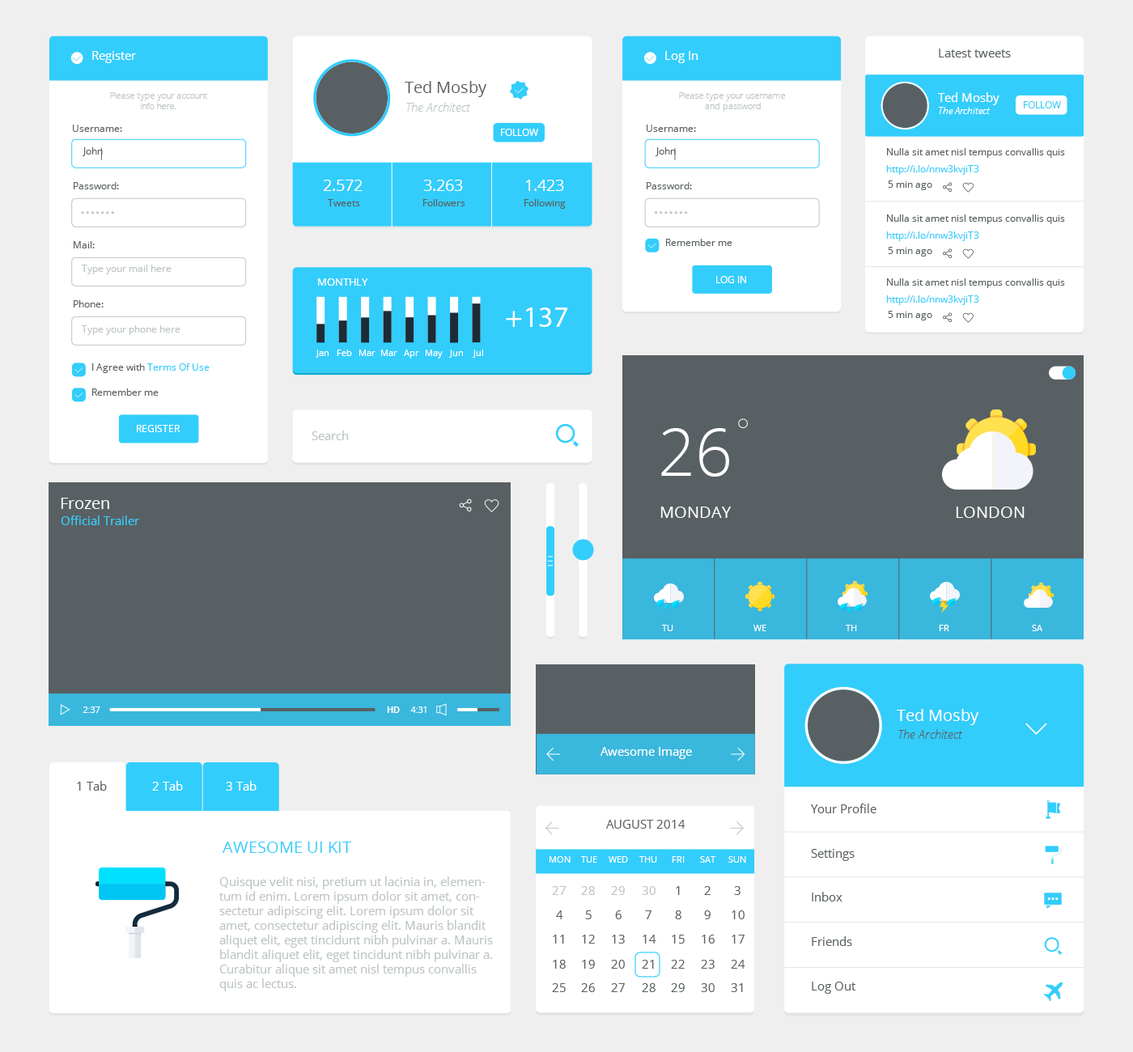
<style>
.page{position:relative;width:1133px;height:1052px;background:#ffffff}
.page>*{position:absolute;margin:0}
.t1{font:12.1px "OpenSans";color:#ffffff}
.t2{font:12.1px "OpenSans";color:#596063}
.t3{font:16.2px "OpenSans";color:#596063}
.t4{font:8.9px "OpenSans-Light";color:#bdc4c6}
.t5{font:12.1px "OpenSansLight-Italic";color:#bdc4c6}
.t6{font:9.7px "OpenSans";color:#32cdfb}
.t7{font:9.7px "OpenSansLight-Italic";color:#ffffff}
.t8{font:9.7px "OpenSans";color:#596063}
.t9{font:9.7px "OpenSans";color:#ffffff}
.t10{font:16.2px "OpenSans";color:#ffffff}
.t11{font:9.7px "OpenSans";color:#bdc4c6}
.t12{font:10.3px "OpenSans";color:#ffffff}
.t13{font:29.7px "MyriadPro-Regular";color:#ffffff}
.t14{font:8.9px "OpenSans";color:#ffffff}
.t15{font:12.1px "OpenSans";color:#bdc4c6}
.t16{font:65.4px "OpenSans-Light";color:#ffffff}
.t17{font:12.1px "OpenSans";color:#32cdfb}
.t18{font:8.9px "OpenSans-Semibold";color:#ffffff}
.t19{font:12.1px "OpenSansLight-Italic";color:#596063}
.t20{font:16.2px "OpenSans";color:#32cdfb}
</style>
<div class="page">
<p class="t1" style="left:92px;top:51px;width:44px;height:12px">Register</p>
<p class="t1" style="left:665px;top:51px;width:34px;height:12px">Log In</p>
<p class="t2" style="left:939px;top:49px;width:72px;height:8px">Latest tweets</p>
<p class="t3" style="left:405px;top:81px;width:81px;height:16px">Ted Mosby</p>
<p class="t4" style="left:110px;top:92px;width:97px;height:17px;text-align:center">Please type your account<br>info here.</p>
<p class="t5" style="left:406px;top:102px;width:65px;height:10px">The Architect</p>
<p class="t4" style="left:679px;top:92px;width:106px;height:20px;text-align:center">Please type your username <br>and password</p>
<p class="t1" style="left:938px;top:92px;width:62px;height:13px">Ted Mosby</p>
<p class="t6" style="left:1024px;top:101px;width:37px;height:7px">FOLLOW</p>
<p class="t7" style="left:939px;top:107px;width:52px;height:7px">The Architect</p>
<p class="t8" style="left:73px;top:125px;width:49px;height:7px">Username:</p>
<p class="t8" style="left:647px;top:125px;width:49px;height:7px">Username:</p>
<p class="t9" style="left:501px;top:129px;width:37px;height:7px">FOLLOW</p>
<p class="t8" style="left:82px;top:147px;width:21px;height:9px">John</p>
<p class="t8" style="left:655px;top:147px;width:21px;height:9px">John</p>
<p class="t8" style="left:887px;top:148px;width:178px;height:10px">Nulla sit amet nisl tempus convallis quis</p>
<p class="t6" style="left:886px;top:165px;width:93px;height:10px">http://i.lo/nnw3kvjiT3</p>
<p class="t8" style="left:74px;top:182px;width:45px;height:7px">Password:</p>
<p class="t10" style="left:323px;top:180px;width:40px;height:11px">2.572</p>
<p class="t10" style="left:423px;top:180px;width:40px;height:11px">3.263</p>
<p class="t10" style="left:526px;top:180px;width:38px;height:11px">1.423</p>
<p class="t8" style="left:647px;top:182px;width:45px;height:7px">Password:</p>
<p class="t8" style="left:888px;top:181px;width:44px;height:9px">5 min ago</p>
<p class="t8" style="left:328px;top:199px;width:32px;height:7px">Tweets</p>
<p class="t8" style="left:423px;top:199px;width:42px;height:7px">Followers</p>
<p class="t8" style="left:525px;top:199px;width:41px;height:10px">Following</p>
<p class="t8" style="left:887px;top:214px;width:178px;height:10px">Nulla sit amet nisl tempus convallis quis</p>
<p class="t6" style="left:886px;top:231px;width:93px;height:10px">http://i.lo/nnw3kvjiT3</p>
<p class="t8" style="left:74px;top:241px;width:21px;height:7px">Mail:</p>
<p class="t8" style="left:666px;top:239px;width:67px;height:7px">Remember me</p>
<p class="t8" style="left:888px;top:247px;width:44px;height:10px">5 min ago</p>
<p class="t11" style="left:82px;top:265px;width:90px;height:9px">Type your mail here</p>
<p class="t12" style="left:318px;top:278px;width:50px;height:8px">MONTHLY</p>
<p class="t9" style="left:716px;top:276px;width:30px;height:7px">LOG IN</p>
<p class="t8" style="left:887px;top:278px;width:178px;height:10px">Nulla sit amet nisl tempus convallis quis</p>
<p class="t8" style="left:74px;top:300px;width:30px;height:8px">Phone:</p>
<p class="t6" style="left:886px;top:295px;width:93px;height:10px">http://i.lo/nnw3kvjiT3</p>
<p class="t13" style="left:506px;top:308px;width:61px;height:19px">+137</p>
<p class="t8" style="left:888px;top:311px;width:44px;height:10px">5 min ago</p>
<p class="t11" style="left:82px;top:325px;width:99px;height:10px">Type your phone here</p>
<p class="t14" style="left:316px;top:350px;width:13px;height:8px">Jan</p>
<p class="t14" style="left:337px;top:350px;width:15px;height:6px">Feb</p>
<p class="t14" style="left:359px;top:350px;width:17px;height:6px">Mar</p>
<p class="t14" style="left:381px;top:350px;width:16px;height:6px">Mar</p>
<p class="t14" style="left:404px;top:350px;width:15px;height:9px">Apr</p>
<p class="t14" style="left:426px;top:350px;width:17px;height:9px">May</p>
<p class="t14" style="left:449px;top:350px;width:14px;height:8px">Jun</p>
<p class="t14" style="left:473px;top:350px;width:10px;height:8px">Jul</p>
<p class="t8" style="left:92px;top:363px;width:118px;height:10px">I Agree with <span class="t6">Terms Of Use</span></p>
<p class="t8" style="left:92px;top:389px;width:67px;height:7px">Remember me</p>
<p class="t9" style="left:137px;top:425px;width:44px;height:7px">REGISTER</p>
<p class="t15" style="left:312px;top:431px;width:37px;height:9px">Search</p>
<p class="t16" style="left:661px;top:428px;width:68px;height:49px">26</p>
<p class="t10" style="left:61px;top:498px;width:48px;height:11px">Frozen</p>
<p class="t10" style="left:660px;top:507px;width:72px;height:11px">MONDAY</p>
<p class="t10" style="left:956px;top:507px;width:69px;height:11px">LONDON</p>
<p class="t17" style="left:61px;top:516px;width:78px;height:9px">Official Trailer</p>
<p class="t14" style="left:662px;top:625px;width:11px;height:6px">TU</p>
<p class="t14" style="left:754px;top:625px;width:13px;height:6px">WE</p>
<p class="t14" style="left:846px;top:625px;width:11px;height:6px">TH</p>
<p class="t14" style="left:939px;top:625px;width:10px;height:6px">FR</p>
<p class="t14" style="left:1032px;top:625px;width:11px;height:6px">SA</p>
<p class="t14" style="left:83px;top:707px;width:17px;height:6px">2:37</p>
<p class="t18" style="left:387px;top:707px;width:13px;height:6px">HD</p>
<p class="t14" style="left:410px;top:707px;width:17px;height:6px">4:31</p>
<p class="t10" style="left:897px;top:709px;width:82px;height:16px">Ted Mosby</p>
<p class="t19" style="left:898px;top:729px;width:65px;height:10px">The Architect</p>
<p class="t1" style="left:601px;top:747px;width:91px;height:12px">Awesome Image</p>
<p class="t2" style="left:77px;top:781px;width:30px;height:10px">1 Tab</p>
<p class="t1" style="left:152px;top:781px;width:31px;height:10px">2 Tab</p>
<p class="t1" style="left:226px;top:781px;width:31px;height:10px">3 Tab</p>
<p class="t2" style="left:811px;top:804px;width:66px;height:9px">Your Profile</p>
<p class="t2" style="left:606px;top:820px;width:80px;height:9px">AUGUST 2014</p>
<p class="t20" style="left:223px;top:842px;width:128px;height:11px">AWESOME UI KIT</p>
<p class="t14" style="left:550px;top:856px;width:21px;height:7px">MON</p>
<p class="t14" style="left:581px;top:856px;width:16px;height:7px">TUE</p>
<p class="t14" style="left:609px;top:856px;width:19px;height:7px">WED</p>
<p class="t14" style="left:639px;top:856px;width:18px;height:7px">THU</p>
<p class="t14" style="left:672px;top:856px;width:13px;height:7px">FRI</p>
<p class="t14" style="left:700px;top:856px;width:16px;height:7px">SAT</p>
<p class="t14" style="left:728px;top:856px;width:18px;height:7px">SUN</p>
<p class="t2" style="left:811px;top:849px;width:44px;height:12px">Settings</p>
<p class="t15" style="left:219px;top:877px;width:274px;height:115px">Quisque velit nisi, pretium ut lacinia in, elementum id enim. Lorem ipsum dolor sit amet, consectetur adipiscing elit. Lorem ipsum dolor sit amet, consectetur adipiscing elit. Mauris blandit aliquet elit, eget tincidunt nibh pulvinar a. Mauris blandit aliquet elit, eget tincidunt nibh pulvinar a. Curabitur alique sit amet nisl tempus convallis quis ac lectus.</p>
<p class="t15" style="left:552px;top:886px;width:14px;height:9px">27</p>
<p class="t15" style="left:581px;top:886px;width:14px;height:9px">28</p>
<p class="t15" style="left:611px;top:886px;width:14px;height:9px">29</p>
<p class="t15" style="left:642px;top:886px;width:14px;height:9px">30</p>
<p class="t2" style="left:676px;top:886px;width:4px;height:9px">1</p>
<p class="t2" style="left:704px;top:886px;width:7px;height:9px">2</p>
<p class="t2" style="left:734px;top:886px;width:7px;height:9px">3</p>
<p class="t2" style="left:812px;top:892px;width:31px;height:10px">Inbox</p>
<p class="t2" style="left:556px;top:911px;width:7px;height:9px">4</p>
<p class="t2" style="left:585px;top:911px;width:7px;height:9px">5</p>
<p class="t2" style="left:615px;top:911px;width:7px;height:9px">6</p>
<p class="t2" style="left:645px;top:911px;width:7px;height:9px">7</p>
<p class="t2" style="left:675px;top:911px;width:7px;height:9px">8</p>
<p class="t2" style="left:704px;top:911px;width:7px;height:9px">9</p>
<p class="t2" style="left:732px;top:911px;width:13px;height:9px">10</p>
<p class="t2" style="left:553px;top:935px;width:11px;height:9px">11</p>
<p class="t2" style="left:582px;top:935px;width:13px;height:9px">12</p>
<p class="t2" style="left:612px;top:935px;width:13px;height:9px">13</p>
<p class="t2" style="left:643px;top:935px;width:13px;height:9px">14</p>
<p class="t2" style="left:672px;top:935px;width:13px;height:9px">15</p>
<p class="t2" style="left:702px;top:935px;width:13px;height:9px">16</p>
<p class="t2" style="left:732px;top:935px;width:13px;height:9px">17</p>
<p class="t2" style="left:812px;top:937px;width:40px;height:9px">Friends</p>
<p class="t2" style="left:553px;top:960px;width:13px;height:9px">18</p>
<p class="t2" style="left:582px;top:960px;width:13px;height:9px">19</p>
<p class="t2" style="left:611px;top:960px;width:14px;height:9px">20</p>
<p class="t2" style="left:642px;top:960px;width:12px;height:9px">21</p>
<p class="t2" style="left:671px;top:960px;width:14px;height:9px">22</p>
<p class="t2" style="left:701px;top:960px;width:14px;height:9px">23</p>
<p class="t2" style="left:731px;top:960px;width:14px;height:9px">24</p>
<p class="t2" style="left:552px;top:983px;width:14px;height:9px">25</p>
<p class="t2" style="left:581px;top:983px;width:14px;height:9px">26</p>
<p class="t2" style="left:611px;top:983px;width:14px;height:9px">27</p>
<p class="t2" style="left:642px;top:983px;width:14px;height:9px">28</p>
<p class="t2" style="left:671px;top:983px;width:14px;height:9px">29</p>
<p class="t2" style="left:701px;top:983px;width:14px;height:9px">30</p>
<p class="t2" style="left:731px;top:983px;width:12px;height:9px">31</p>
<p class="t2" style="left:812px;top:982px;width:44px;height:12px">Log Out</p>
</div>
